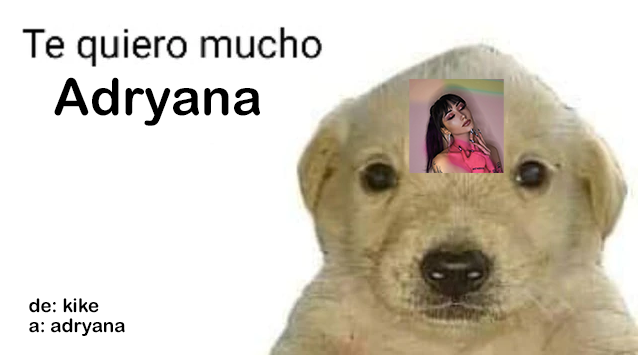
<style>
.page{position:relative;width:639px;height:356px;background:#ffffff}
.page>*{position:absolute;margin:0}
.t1{font:50.9px "ArialRoundedMTBold";color:#000000}
.t2{font:18.9px "ArialRoundedMTBold";color:#000000}
</style>
<div class="page">
<p class="t1" style="left:54px;top:77px;width:206px;height:49px">Adryana</p>
<p class="t2" style="left:29px;top:298px;width:96px;height:38px">de: kike<br>a: adryana</p>
</div>
